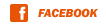
<style>
.page{position:relative;width:106px;height:26px;background:#ffffff}
.page>*{position:absolute;margin:0}
.t1{font:12px "FranklinGothic-HeavyItal";letter-spacing:-0.01em;color:#e75405;text-transform:uppercase}
</style>
<div class="page">
<p class="t1" style="left:38px;top:8px;width:60px;height:10px">Facebook</p>
</div>
